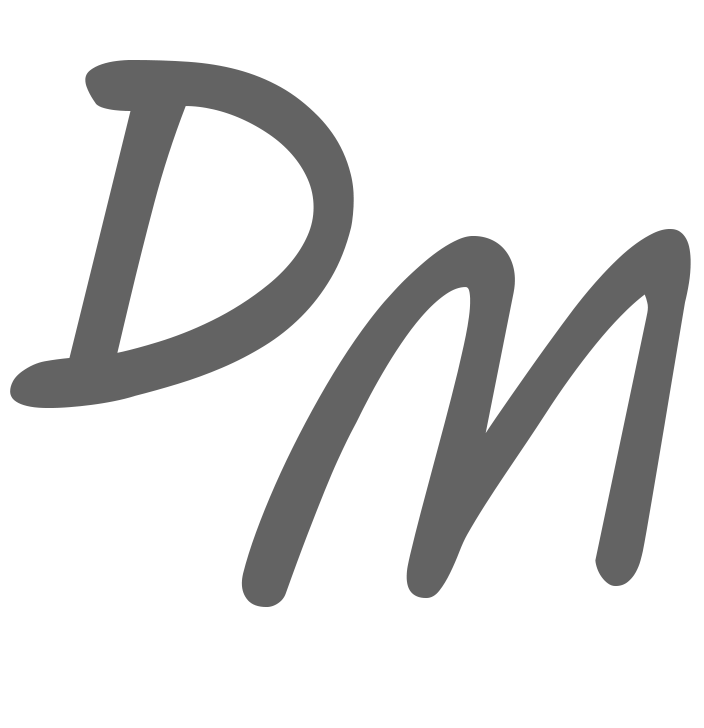
<style>
.page{position:relative;width:704px;height:728px;background:#ffffff}
.page>*{position:absolute;margin:0}
.t1{font:500px "MVBoli";color:#636363}
</style>
<div class="page">
<p class="t1" style="left:10px;top:60px;width:344px;height:348px">D</p>
<p class="t1" style="left:241px;top:229px;width:450px;height:378px">M</p>
</div>
